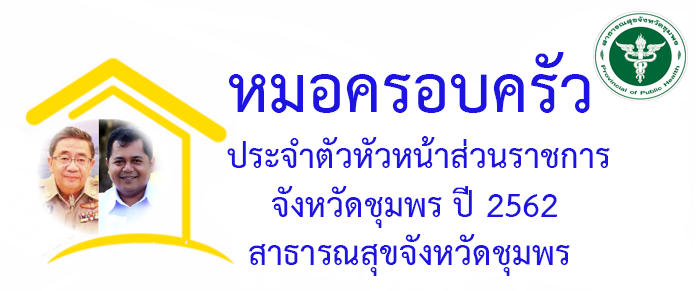
<style>
.page{position:relative;width:698px;height:291px;background:#ffffff}
.page>*{position:absolute;margin:0}
.t1{font:93.3px "THSarabunPSK-Bold";color:#1e14e1}
.t2{font:48px "THSarabunPSK-Bold";color:#1e14e1}
</style>
<div class="page">
<p class="t1" style="left:228px;top:52px;width:362px;height:61px">หมอครอบครัว</p>
<p class="t2" style="left:227px;top:136px;width:383px;height:32px">ประจำตัวหัวหน้าส่วนราชการ</p>
<p class="t2" style="left:271px;top:186px;width:287px;height:42px">จังหวัดชุมพร ปี 2562</p>
<p class="t2" style="left:249px;top:234px;width:321px;height:42px">สาธารณสุขจังหวัดชุมพร</p>
</div>
